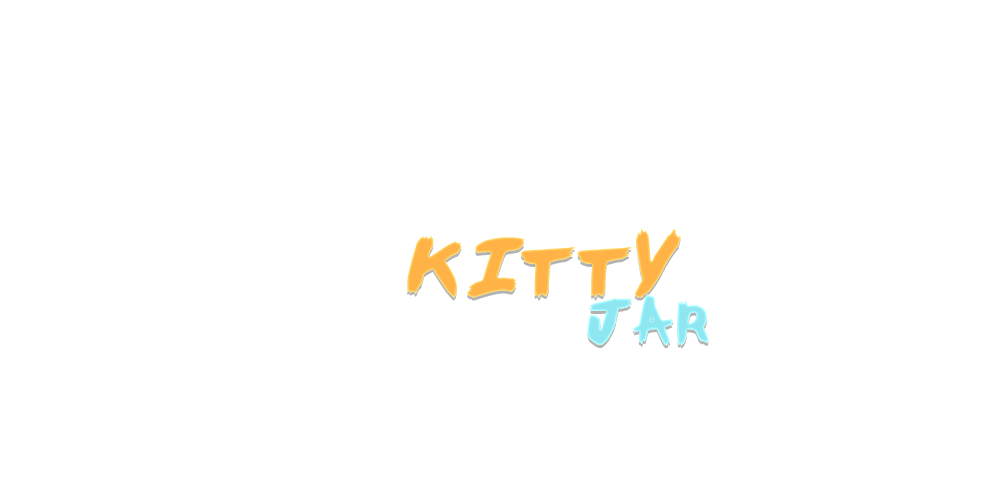
<style>
.page{position:relative;width:1000px;height:500px;background:#ffffff}
.page>*{position:absolute;margin:0}
.t1{font:96px/48px "AngryNerds";letter-spacing:0.07em;color:#ffb346;font-weight:bold}
.t2{font:72px/48px "AngryNerds";letter-spacing:0.07em;color:#8ee6f0;font-weight:bold}
</style>
<div class="page">
<p class="t1" style="left:407px;top:228px;width:302px;height:118px">kitty <br>     <span class="t2">jar</span></p>
</div>
